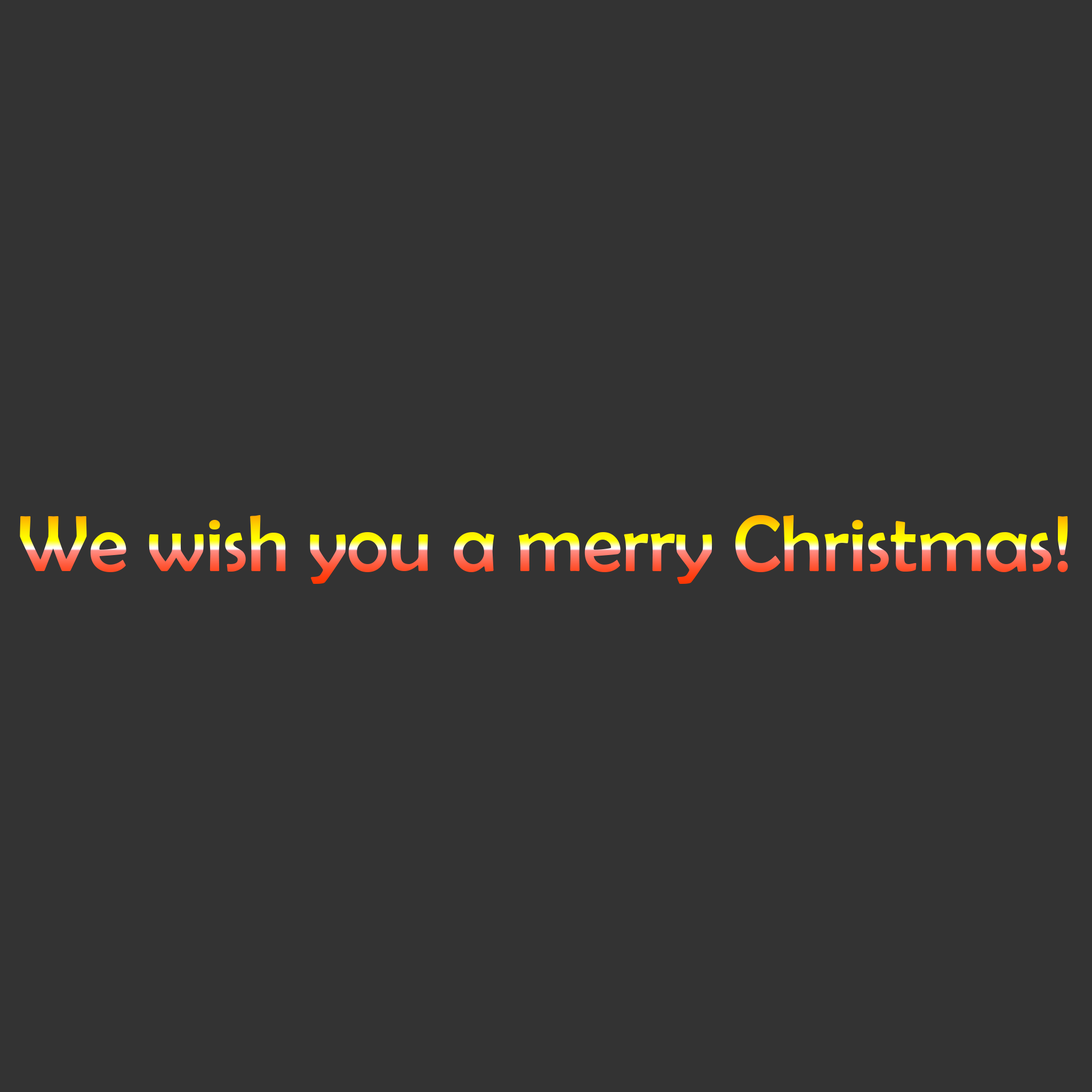
<style>
.page{position:relative;width:1092px;height:1092px;background:#333333}
.page>*{position:absolute;margin:0}
.t1{font:80px "BerlinSansFB-Reg"}
</style>
<div class="page">
<p class="t1" style="left:20px;top:515px;width:1048px;height:69px">We wish you a merry Christmas!</p>
</div>
